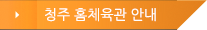
<style>
.page{position:relative;width:207px;height:30px}
.page>*{position:absolute;margin:0}
.t1{font:14px "NanumGothic";color:#ffffff}
</style>
<div class="page">
<p class="t1" style="left:45px;top:8px;width:111px;height:14px">청주 홈체육관 안내</p>
</div>
